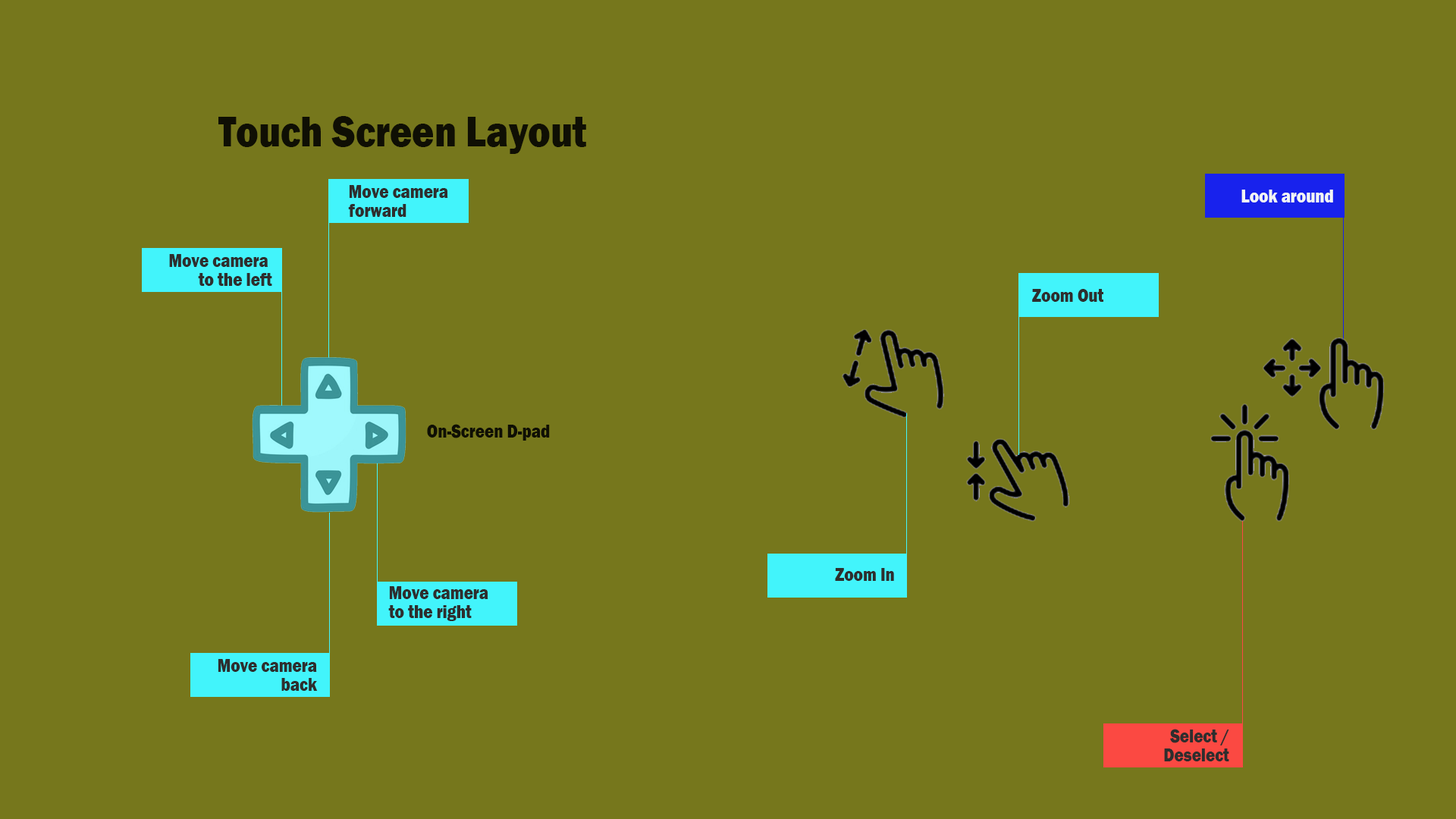
<style>
.page{position:relative;width:1456px;height:819px;background:#76771c}
.page>*{position:absolute;margin:0}
.t1{font:44.7px "FranklinGothic-Heavy";color:#0f0f04;scale:0.85 1}
.t2{font:18.6px "FranklinGothic-Heavy";color:#2e2e2e;scale:0.85 1}
.t3{font:18.6px "FranklinGothic-Heavy";color:#f2f5f5;scale:0.85 1}
.t4{font:18.6px "FranklinGothic-Heavy";color:#0f0f04;scale:0.85 1}
</style>
<div class="page">
<p class="t1" style="left:218px;top:116px;width:368px;height:38px">Touch Screen Layout</p>
<p class="t2" style="left:348px;top:185px;width:100px;height:32px">Move camera <br>forward</p>
<p class="t3" style="left:1241px;top:190px;width:92px;height:12px">Look around</p>
<p class="t2" style="left:169px;top:254px;width:103px;height:32px;text-align:right">Move camera <br>to the left</p>
<p class="t2" style="left:1032px;top:289px;width:71px;height:13px">Zoom Out</p>
<p class="t4" style="left:427px;top:424px;width:123px;height:17px">On-Screen D-pad</p>
<p class="t2" style="left:835px;top:568px;width:59px;height:13px">Zoom In</p>
<p class="t2" style="left:388px;top:586px;width:100px;height:35px">Move camera <br>to the right</p>
<p class="t2" style="left:218px;top:659px;width:100px;height:32px;text-align:right">Move camera<br>back</p>
<p class="t2" style="left:1164px;top:729px;width:65px;height:32px;text-align:right">Select /<br> Deselect</p>
</div>
